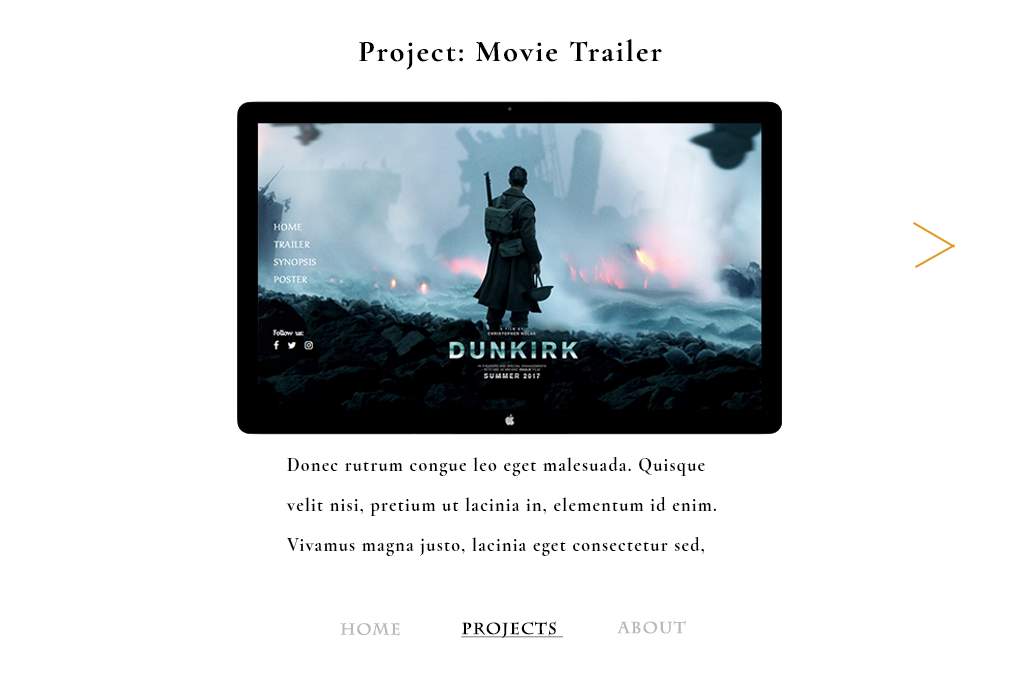
<style>
.page{position:relative;width:1020px;height:700px;background:#ffffff}
.page>*{position:absolute;margin:0}
.t1{font:30px "CormorantGaramond-Bold";letter-spacing:0.07em;color:#000000}
.t2{font:18px/40px "CormorantGaramond-Bold";letter-spacing:0.07em;color:#000000}
.t3{font:24px/40px "CormorantGaramond-Bold";letter-spacing:0.07em;color:#000000}
.t4{font:16px/40px "CormorantGaramond-Regular";letter-spacing:0.07em;color:#000000}
.t5{font:16px "CharlemagneStd-Bold";letter-spacing:0.07em;color:#b8b8b8}
.t6{font:16px "CharlemagneStd-Bold";letter-spacing:0.07em;color:#000000;text-decoration:underline}
</style>
<div class="page">
<p class="t1" style="left:359px;top:39px;width:303px;height:31px">Project: Movie Trailer</p>
<p class="t2" style="left:286px;top:457px;width:430px;height:99px">Donec rutrum congue leo eget malesuada. Quisque velit nisi, pretium ut lacinia in, elementum id enim. Vivamus magna justo, lacinia eget consectetur sed, <span class="t3">convallis at tellus. Nulla </span><span class="t4">porttitor accumsan tincidunt.</span></p>
<p class="t5" style="left:340px;top:622px;width:60px;height:14px">Home</p>
<p class="t6" style="left:461px;top:621px;width:102px;height:17px">Projects</p>
<p class="t5" style="left:617px;top:620px;width:69px;height:14px">About</p>
</div>
